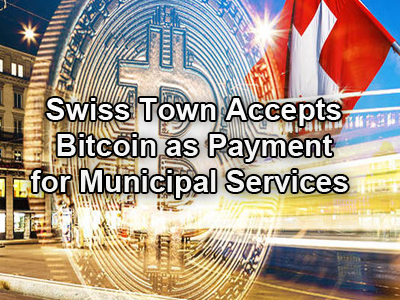
<style>
.page{position:relative;width:400px;height:300px}
.page>*{position:absolute;margin:0}
.t1{font:30px "Arial-BoldMT";color:#f3f4f3}
</style>
<div class="page">
<p class="t1" style="left:30px;top:98px;width:318px;height:100px;text-align:center">Swiss Town Accepts<br>Bitcoin as Payment<br>for Municipal Services</p>
</div>
